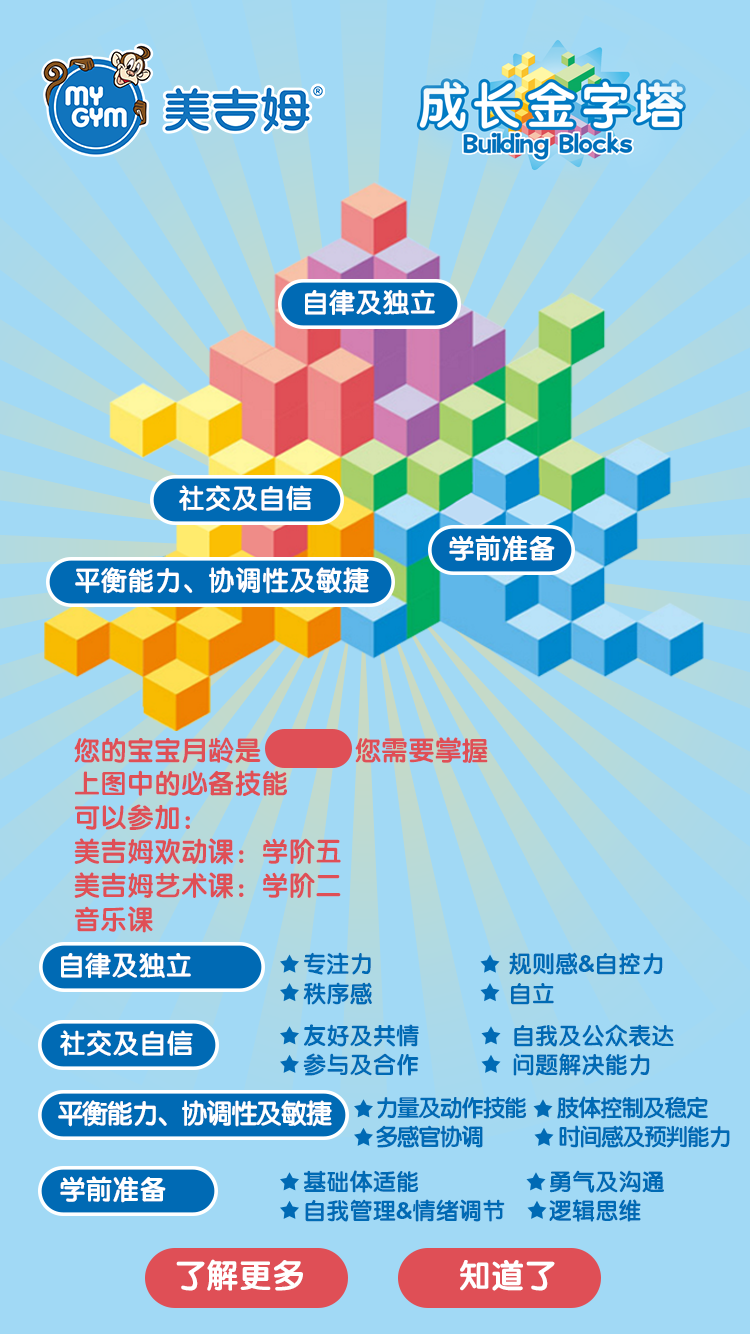
<style>
.page{position:relative;width:750px;height:1334px;background:#a1d9f5}
.page>*{position:absolute;margin:0}
.t1{font:27.2px "FZY4JW--GB1-0";color:#ffffff}
.t2{font:27.2px/39.4px "FZY4JW--GB1-0";color:#df4f56}
.t3{font:23.5px/34px "FZY4JW--GB1-0";color:#006ab4}
.t4{font:23.5px/34px "FZY4JW--GB1-0";letter-spacing:-0.075em;color:#006ab4}
.t5{font:27.2px "FZY4JW--GB1-0";letter-spacing:-0.075em;color:#ffffff}
.t6{font:33px "FZY4JW--GB1-0";color:#ffffff}
</style>
<div class="page">
<p class="t1" style="left:305px;top:289px;width:130px;height:26px">自律及独立</p>
<p class="t1" style="left:179px;top:485px;width:133px;height:26px">社交及自信</p>
<p class="t1" style="left:449px;top:535px;width:106px;height:27px">学前准备</p>
<p class="t1" style="left:75px;top:567px;width:294px;height:27px">平衡能力、协调性及敏捷</p>
<p class="t2" style="left:74px;top:737px;width:414px;height:196px">您的宝宝月龄是             您需要掌握<br>上图中的必备技能<br>可以参加：<br>美吉姆欢动课：学阶五<br>美吉姆艺术课：学阶二<br>音乐课</p>
<p class="t1" style="left:61px;top:952px;width:130px;height:26px">自律及独立</p>
<p class="t3" style="left:303px;top:952px;width:360px;height:53px">专注力                      规则感&amp;自控力<br>秩序感                      自立</p>
<p class="t3" style="left:303px;top:1024px;width:371px;height:52px">友好及共情               自我及公众表达<br>参与及合作               问题解决能力</p>
<p class="t1" style="left:60px;top:1030px;width:133px;height:26px">社交及自信</p>
<p class="t4" style="left:376px;top:1096px;width:354px;height:52px">力量及动作技能       肢体控制及稳定<br>多感官协调                 时间感及预判能力</p>
<p class="t5" style="left:58px;top:1100px;width:274px;height:27px">平衡能力、协调性及敏捷</p>
<p class="t1" style="left:60px;top:1176px;width:106px;height:27px">学前准备</p>
<p class="t3" style="left:304px;top:1170px;width:360px;height:52px">基础体适能                     勇气及沟通<br>自我管理&amp;情绪调节       逻辑思维</p>
<p class="t6" style="left:176px;top:1259px;width:127px;height:32px">了解更多</p>
<p class="t6" style="left:460px;top:1260px;width:95px;height:31px">知道了</p>
</div>
